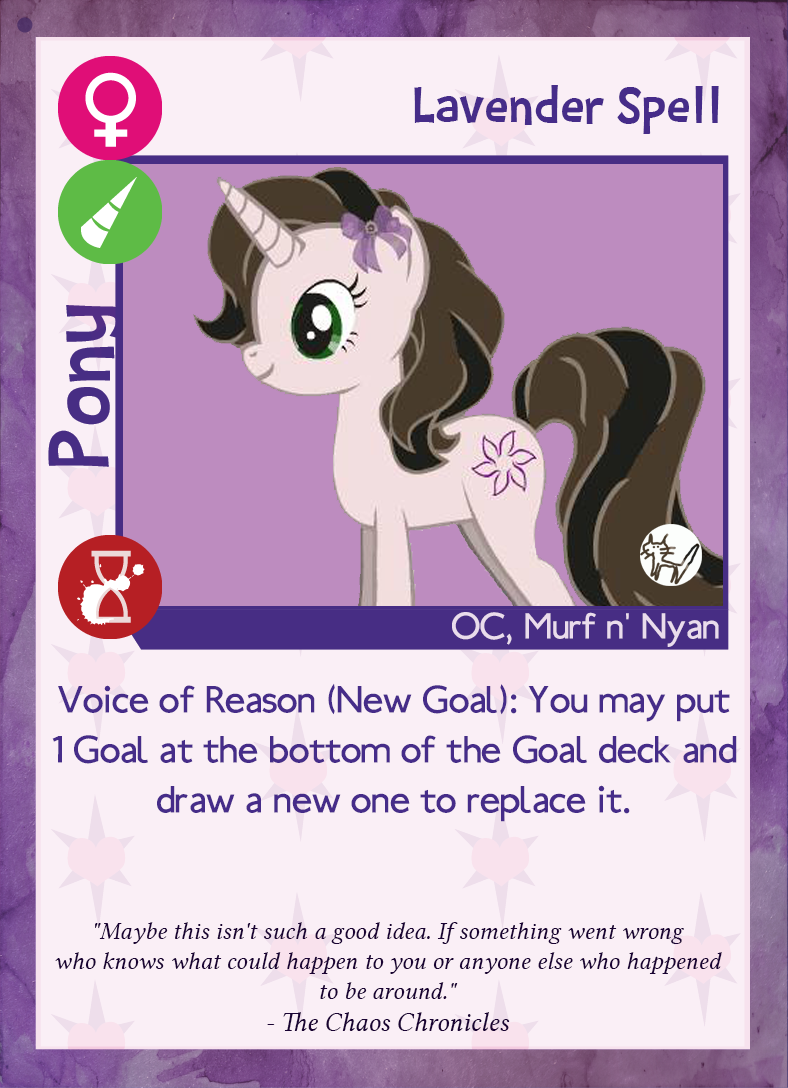
<style>
.page{position:relative;width:788px;height:1088px;background:#faeff6}
.page>*{position:absolute;margin:0}
.t1{font:56.2px "BarthowheelRegular";color:#462c89}
.t2{font:39.8px "Ubahn";color:#eadcec}
.t3{font:41.7px "Ubahn";color:#462c89}
.t4{font:25px "LinLibertineI";color:#190233}
.t5{font:27.1px "LinLibertineI";color:#190233}
</style>
<div class="page">
<p class="t1" style="left:414px;top:85px;width:305px;height:49px">Lavender Spell</p>
<p class="t2" style="left:452px;top:612px;width:267px;height:35px">OC, Murf n' Nyan</p>
<p class="t3" style="left:52px;top:683px;width:685px;height:139px;text-align:center">Voice of Reason (New Goal): You may put<br>1 Goal at the bottom of the Goal deck and<br>draw a new one to replace it.</p>
<p class="t4" style="left:55px;top:922px;width:667px;height:109px;text-align:center">"Maybe this isn't such a good idea. If something went wrong<br>who knows what could happen to you or anyone else who happened<br>to be around."<br>- <span class="t5">The Chaos Chronicles</span></p>
</div>
